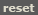
<style>
.page{position:relative;width:38px;height:15px;background:#5a5a5a}
.page>*{position:absolute;margin:0}
.t1{font:11px "Verdana-Bold";color:#dedbcb}
</style>
<div class="page">
<p class="t1" style="left:3px;top:4px;width:32px;height:8px">reset</p>
</div>
